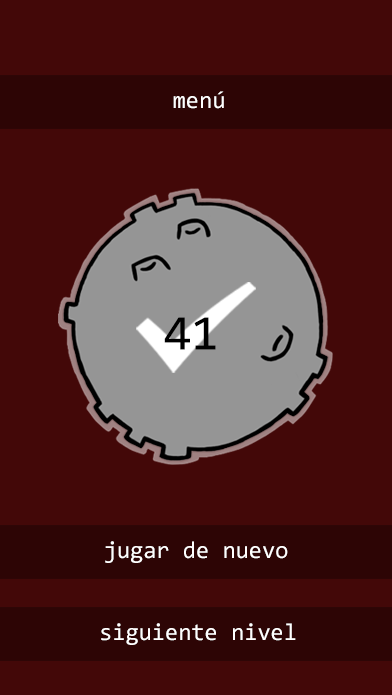
<style>
.page{position:relative;width:392px;height:695px;background:#430808}
.page>*{position:absolute;margin:0}
.t1{font:24px "Consolas";color:#ffffff}
.t2{font:50px "Consolas";color:#000000}
</style>
<div class="page">
<p class="t1" style="left:173px;top:91px;width:51px;height:18px">menú</p>
<p class="t2" style="left:164px;top:317px;width:52px;height:33px">41</p>
<p class="t1" style="left:105px;top:541px;width:183px;height:22px">jugar de nuevo</p>
<p class="t1" style="left:101px;top:623px;width:195px;height:22px">siguiente nivel</p>
</div>
